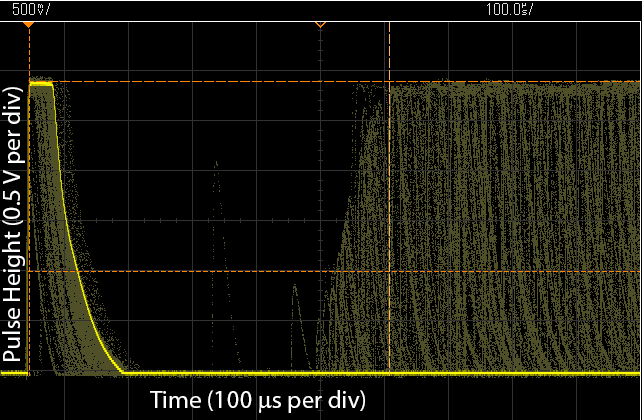
<style>
.page{position:relative;width:642px;height:420px;background:#000000}
.page>*{position:absolute;margin:0}
.t1{font:25px "MyriadPro-Regular";color:#ffffff}
.t2{font:25px "SymbolMT";color:#ffffff}
</style>
<div class="page">
<p class="t1" style="left:2px;top:87px;width:23px;height:274px;rotate:-90deg">Pulse Height (0.5 V per div)</p>
<p class="t1" style="left:150px;top:390px;width:215px;height:23px">Time (100 <span class="t2">m</span>s per div)</p>
</div>
